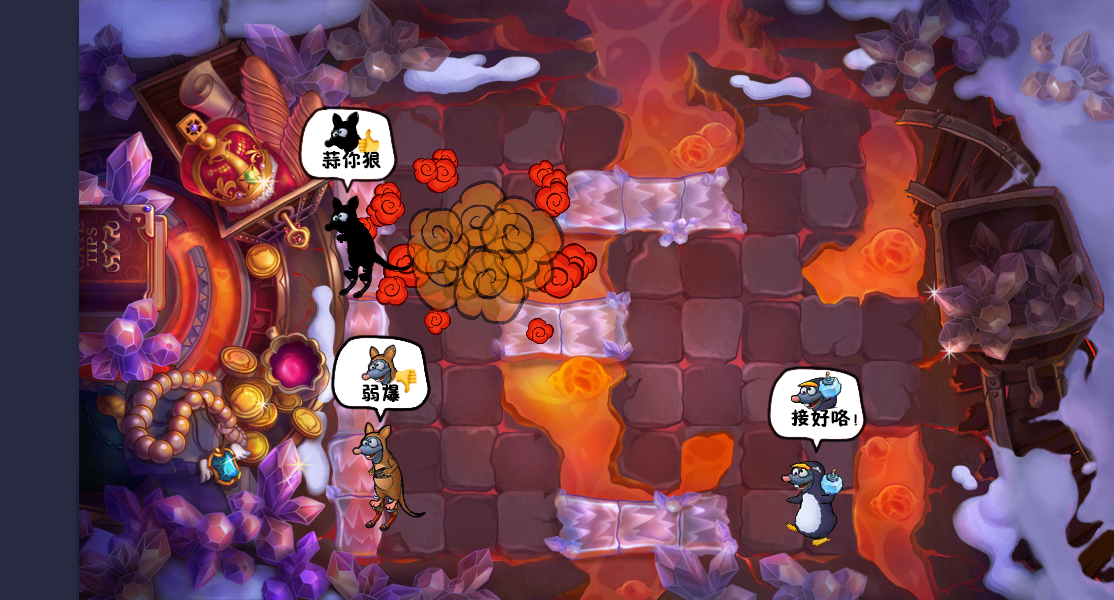
<style>
.page{position:relative;width:1114px;height:600px}
.page>*{position:absolute;margin:0}
.t1{font:19.6px "FZSEJW--GB1-0";color:#000000;font-weight:bold}
</style>
<div class="page">
<p class="t1" style="left:322px;top:151px;width:59px;height:18px">蒜你狠</p>
<p class="t1" style="left:362px;top:384px;width:38px;height:18px">弱爆</p>
<p class="t1" style="left:791px;top:409px;width:67px;height:18px">接好咯！</p>
</div>
